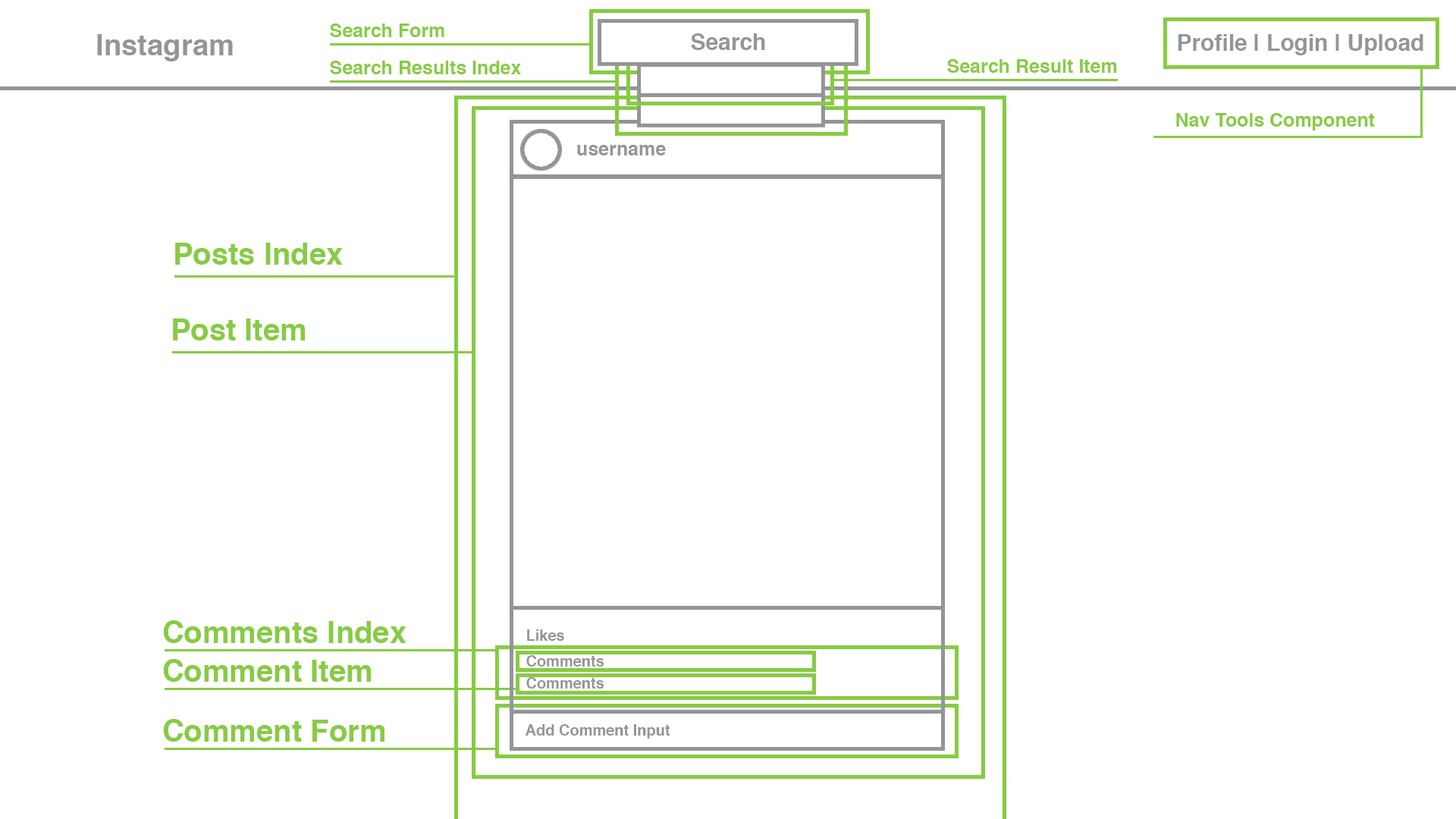
<style>
.page{position:relative;width:1456px;height:819px;background:#ffffff}
.page>*{position:absolute;margin:0}
.t1{font:19px "Helvetica-Bold";color:#87cb44}
.t2{font:29px "Helvetica-Bold";color:#949598}
.t3{font:22.7px "Helvetica-Bold";color:#949598}
.t4{font:19px "Helvetica-Bold";color:#949598}
.t5{font:30.3px "Helvetica-Bold";color:#87cb44}
.t6{font:15.2px "Helvetica-Bold";color:#949598}
</style>
<div class="page">
<p class="t1" style="left:330px;top:24px;width:114px;height:13px">Search Form</p>
<p class="t2" style="left:97px;top:34px;width:136px;height:27px">Instagram</p>
<p class="t3" style="left:691px;top:33px;width:74px;height:17px">Search</p>
<p class="t3" style="left:1178px;top:34px;width:245px;height:21px">Profile | Login | Upload</p>
<p class="t1" style="left:330px;top:61px;width:191px;height:13px">Search Results Index</p>
<p class="t1" style="left:947px;top:59px;width:170px;height:14px">Search Result Item</p>
<p class="t1" style="left:1176px;top:113px;width:199px;height:17px">Nav Tools Component</p>
<p class="t4" style="left:577px;top:145px;width:89px;height:10px">username</p>
<p class="t5" style="left:175px;top:243px;width:168px;height:22px">Posts Index</p>
<p class="t5" style="left:173px;top:318px;width:132px;height:22px">Post Item</p>
<p class="t5" style="left:163px;top:620px;width:243px;height:23px">Comments Index</p>
<p class="t6" style="left:527px;top:629px;width:37px;height:12px">Likes</p>
<p class="t5" style="left:163px;top:659px;width:208px;height:23px">Comment Item</p>
<p class="t6" style="left:526px;top:655px;width:78px;height:12px">Comments</p>
<p class="t6" style="left:526px;top:677px;width:78px;height:12px">Comments</p>
<p class="t5" style="left:163px;top:719px;width:221px;height:23px">Comment Form</p>
<p class="t6" style="left:526px;top:724px;width:144px;height:15px">Add Comment Input</p>
</div>
